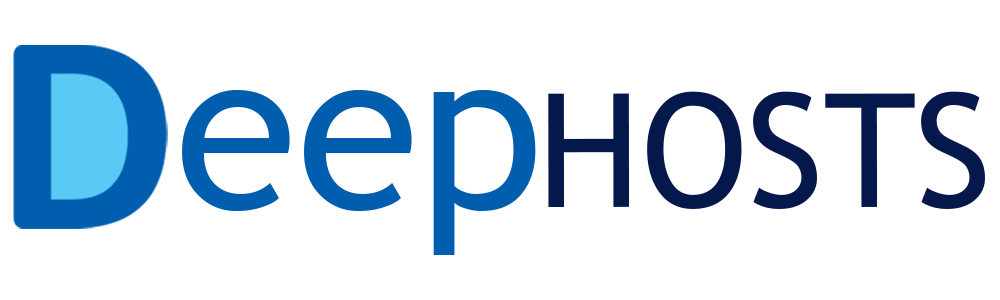
<style>
.page{position:relative;width:1000px;height:300px;background:#ffffff}
.page>*{position:absolute;margin:0}
.t1{font:223.3px "TrebuchetMS";color:#015dad}
.t2{font:158.3px "TrebuchetMS";color:#05184b}
</style>
<div class="page">
<p class="t1" style="left:182px;top:90px;width:354px;height:165px">eep</p>
<p class="t2" style="left:548px;top:91px;width:437px;height:118px">HOSTS</p>
</div>
